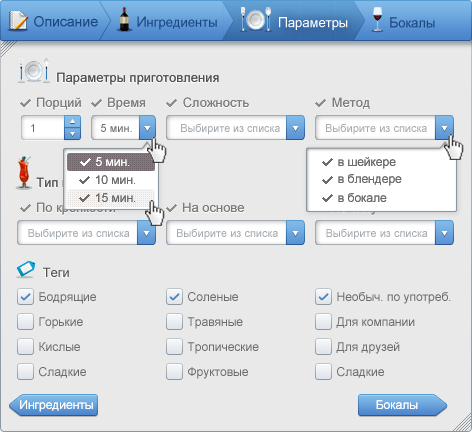
<style>
.page{position:relative;width:472px;height:432px;background:#e9e9e9}
.page>*{position:absolute;margin:0}
.t1{font:14px "ArialMT";color:#1b4680;font-weight:bold}
.t2{font:13px "ArialMT";color:#1b4680;font-weight:bold}
.t3{font:13px "ArialMT";color:#ffffff;font-weight:bold}
.t4{font:14px "ArialMT";color:#ffffff;font-weight:bold}
.t5{font:13px "ArialMT";color:#505050}
.t6{font:13px "ArialMT"}
.t7{font:13px "ArialMT";color:#7b7b7b}
.t8{font:11px "ArialMT";color:#6b6b6b}
.t9{font:11px "ArialMT";color:#a6acb2}
.t10{font:12px "ArialMT";color:#ffffff}
.t11{font:12px "ArialMT";color:#6b6b6b}
</style>
<div class="page">
<p class="t1" style="left:34px;top:16px;width:64px;height:11px">Описание</p>
<p class="t2" style="left:137px;top:16px;width:80px;height:14px"><span class="t1">И</span>нгредиенты</p>
<p class="t3" style="left:279px;top:17px;width:69px;height:13px"><span class="t4">П</span>араметры</p>
<p class="t2" style="left:390px;top:17px;width:45px;height:11px"><span class="t1">Б</span>окалы</p>
<p class="t5" style="left:57px;top:72px;width:162px;height:13px">Параметры приготовления</p>
<p class="t6" style="left:37px;top:98px;width:44px;height:13px">Порций</p>
<p class="t7" style="left:37px;top:97px;width:44px;height:13px">Порций</p>
<p class="t6" style="left:108px;top:98px;width:37px;height:13px">Время</p>
<p class="t7" style="left:108px;top:97px;width:37px;height:13px">Время</p>
<p class="t6" style="left:183px;top:98px;width:66px;height:11px">Сложность</p>
<p class="t7" style="left:183px;top:97px;width:66px;height:11px">Сложность</p>
<p class="t6" style="left:332px;top:98px;width:38px;height:12px">Метод</p>
<p class="t7" style="left:332px;top:97px;width:38px;height:12px">Метод</p>
<p class="t8" style="left:31px;top:124px;width:3px;height:8px">1</p>
<p class="t8" style="left:101px;top:124px;width:31px;height:8px">5 мин.</p>
<p class="t9" style="left:181px;top:123px;width:99px;height:12px">Выбирите из списка</p>
<p class="t9" style="left:326px;top:123px;width:101px;height:12px">Выбирите из списка</p>
<p class="t10" style="left:96px;top:157px;width:33px;height:9px">5 мин.</p>
<p class="t11" style="left:338px;top:157px;width:58px;height:12px">в шейкере</p>
<p class="t11" style="left:338px;top:174px;width:64px;height:12px">в блендере</p>
<p class="t11" style="left:96px;top:175px;width:39px;height:9px">10 мин.</p>
<p class="t11" style="left:96px;top:193px;width:39px;height:9px">15 мин.</p>
<p class="t11" style="left:338px;top:193px;width:49px;height:9px">в бокале</p>
<p class="t6" style="left:37px;top:203px;width:78px;height:13px">По крепкости</p>
<p class="t6" style="left:37px;top:202px;width:78px;height:13px">По крепкости</p>
<p class="t7" style="left:183px;top:202px;width:61px;height:10px">На основе</p>
<p class="t9" style="left:28px;top:228px;width:102px;height:12px">Выбирите из списка</p>
<p class="t9" style="left:177px;top:228px;width:101px;height:12px">Выбирите из списка</p>
<p class="t9" style="left:326px;top:228px;width:102px;height:12px">Выбирите из списка</p>
<p class="t5" style="left:43px;top:267px;width:26px;height:10px">Теги</p>
<p class="t11" style="left:39px;top:292px;width:57px;height:12px">Бодрящие</p>
<p class="t11" style="left:188px;top:292px;width:50px;height:10px">Соленые</p>
<p class="t11" style="left:337px;top:292px;width:114px;height:12px">Необыч. по употреб.</p>
<p class="t11" style="left:39px;top:317px;width:44px;height:12px">Горькие</p>
<p class="t11" style="left:187px;top:317px;width:56px;height:12px">Травяные</p>
<p class="t11" style="left:336px;top:317px;width:79px;height:11px">Для компании</p>
<p class="t11" style="left:39px;top:342px;width:41px;height:9px">Кислые</p>
<p class="t11" style="left:187px;top:342px;width:72px;height:12px">Тропические</p>
<p class="t11" style="left:336px;top:342px;width:64px;height:12px">Для друзей</p>
<p class="t11" style="left:39px;top:367px;width:47px;height:11px">Сладкие</p>
<p class="t11" style="left:188px;top:367px;width:60px;height:12px">Фруктовые</p>
<p class="t11" style="left:337px;top:367px;width:47px;height:11px">Сладкие</p>
<p class="t10" style="left:20px;top:400px;width:73px;height:12px">Ингредиенты</p>
<p class="t10" style="left:376px;top:400px;width:42px;height:9px">Бокалы</p>
</div>
